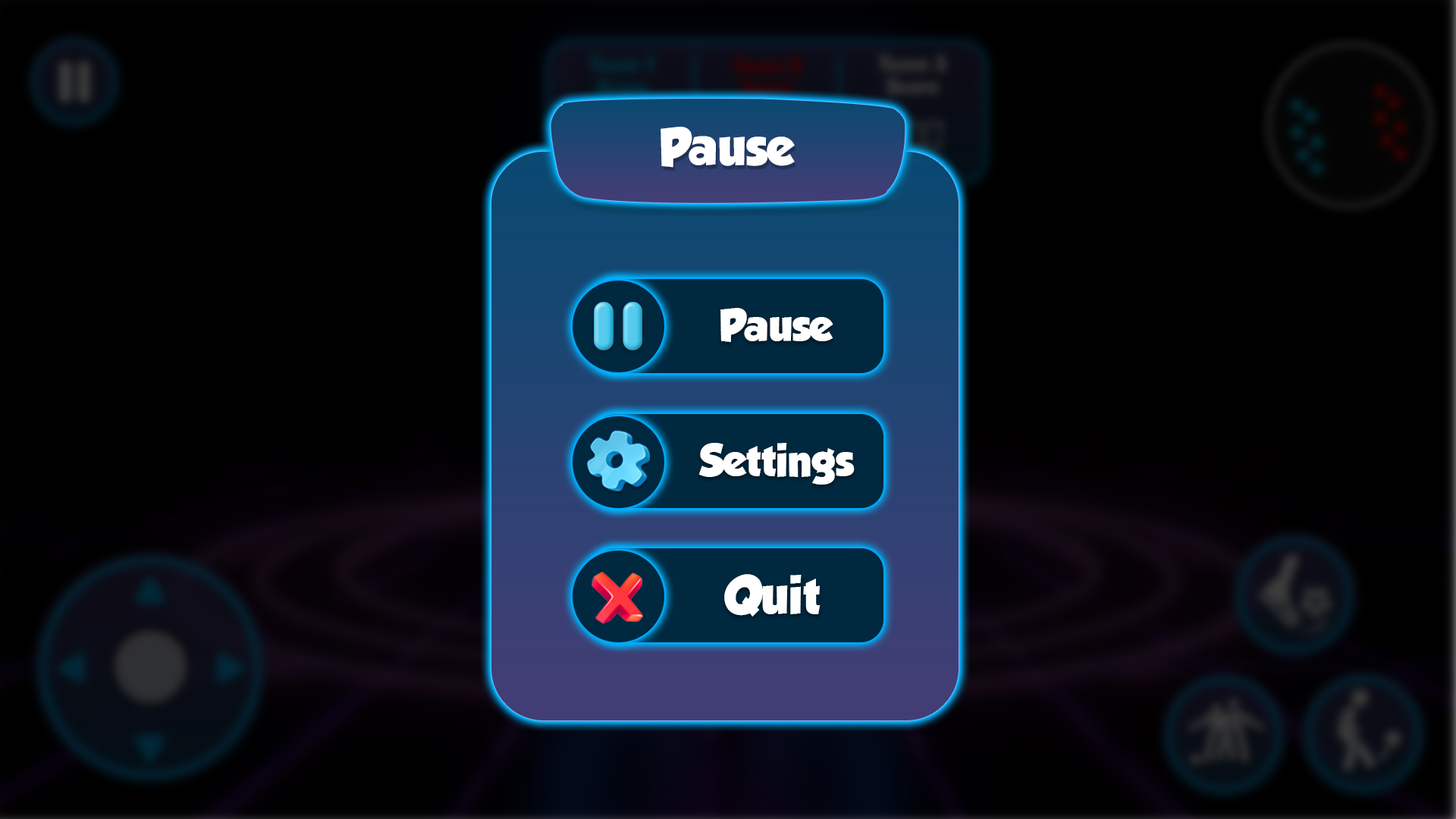
<style>
.page{position:relative;width:1456px;height:819px;background:#000000}
.page>*{position:absolute;margin:0}
.t1{font:47.6px "GROBOLD";color:#ffffff}
.t2{font:40.1px "GROBOLD";color:#ffffff}
.t3{font:46.6px "GROBOLD";color:#ffffff}
</style>
<div class="page">
<p class="t1" style="left:660px;top:127px;width:135px;height:41px">Pause</p>
<p class="t2" style="left:720px;top:308px;width:113px;height:34px">Pause</p>
<p class="t2" style="left:698px;top:443px;width:157px;height:42px">Settings</p>
<p class="t3" style="left:724px;top:574px;width:97px;height:43px">Quit</p>
</div>
